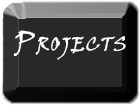
<style>
.page{position:relative;width:140px;height:105px;background:#282828}
.page>*{position:absolute;margin:0}
.t1{font:48px "VinerHandITC";letter-spacing:0.05em;color:#ffffff;font-variant:small-caps}
</style>
<div class="page">
<p class="t1" style="left:13px;top:30px;width:113px;height:30px">Projects</p>
</div>
